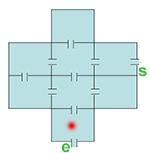
<style>
.page{position:relative;width:150px;height:153px;background:#ffffff}
.page>*{position:absolute;margin:0}
.t1{font:16.3px "Arial-BoldMT";letter-spacing:-0.017em;color:#2dbf2a}
</style>
<div class="page">
<p class="t1" style="left:138px;top:67px;width:9px;height:10px">s</p>
<p class="t1" style="left:61px;top:143px;width:9px;height:10px">e</p>
</div>
